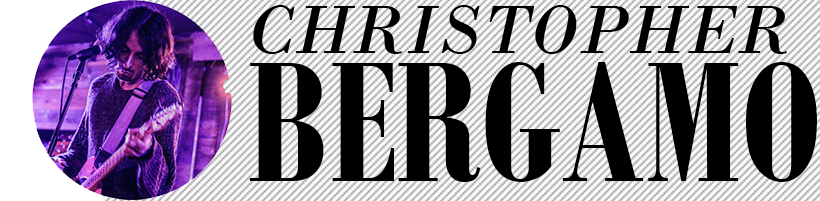
<style>
.page{position:relative;width:820px;height:201px;background:#000000}
.page>*{position:absolute;margin:0}
.t1{font:72px "BodoniMT-Italic";color:#000000}
.t2{font:186.3px "BodoniMTCondensed-Bold";color:#000000}
</style>
<div class="page">
<p class="t1" style="left:253px;top:5px;width:534px;height:49px">CHRISTOPHER</p>
<p class="t2" style="left:249px;top:62px;width:568px;height:120px">BERGAMO</p>
</div>
